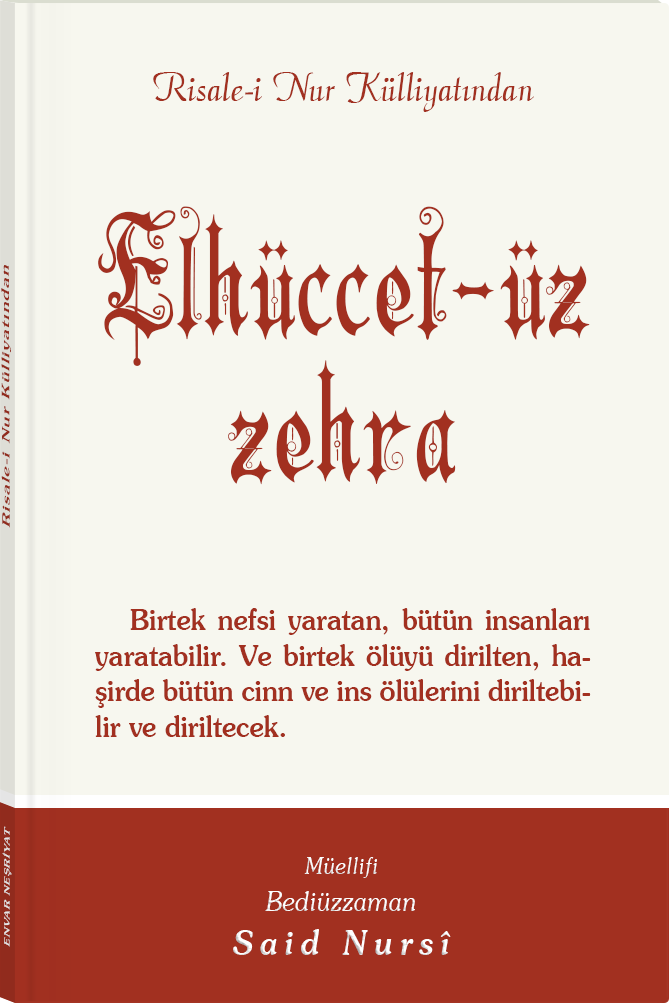
<style>
.page{position:relative;width:669px;height:1003px;background:#f7f7ef}
.page>*{position:absolute;margin:0}
.t1{font:45.3px "Barla © 072 Aria ScriptScriptSSi";color:#a23020;scale:0.94 1}
.t2{font:162.9px/145.3px "Barla © 001 Liva Nur";letter-spacing:-0.001em;color:#a23020;scale:0.92 1}
.t3{font:11.4px "Souvenir-Medium";letter-spacing:0.08em;color:#a23020;scale:1.65 1}
.t4{font:29px/35.6px "Souvenir-Medium";color:#a23020;scale:0.92 1}
.t5{font:8.3px "Souvenir-Medium";letter-spacing:0.08em;color:#e5e5e5;scale:1.43 1}
.t6{font:27.1px/37.8px "Souvenir-LightItalic";color:#ffffff;scale:0.92 1}
.t7{font:22.8px/39.8px "Souvenir-LightItalic";color:#ffffff;scale:0.92 1}
.t8{font:33.9px/43.8px "Souvenir-MediumItalic";letter-spacing:0.2em;color:#ffffff;scale:0.92 1}
</style>
<div class="page">
<p class="t1" style="left:153px;top:72px;width:381px;height:40px">Risale-i Nur Külliyatından</p>
<p class="t2" style="left:98px;top:206px;width:492px;height:279px;text-align:center">Elhüccet-üz<br>zehra</p>
<p class="t3" style="left:1px;top:265px;width:10px;height:263px;rotate:-90deg">Risale-i Nur Külliyatından</p>
<p class="t4" style="left:95px;top:608px;width:496px;height:129px;text-align:justify">Birtek nefsi yaratan, bütün insanları yaratabilir. Ve birtek ölüyü dirilten, haşirde bütün cinn ve ins ölülerini diriltebilir ve diriltecek.</p>
<p class="t5" style="left:2px;top:826px;width:10px;height:121px;rotate:-90deg">ENVAR NEŞRİYAT</p>
<p class="t6" style="left:233px;top:857px;width:218px;height:98px;text-align:center"><span class="t7">Müellifi<br></span>Bediüzzaman<br><span class="t8">Said Nursî</span></p>
</div>
